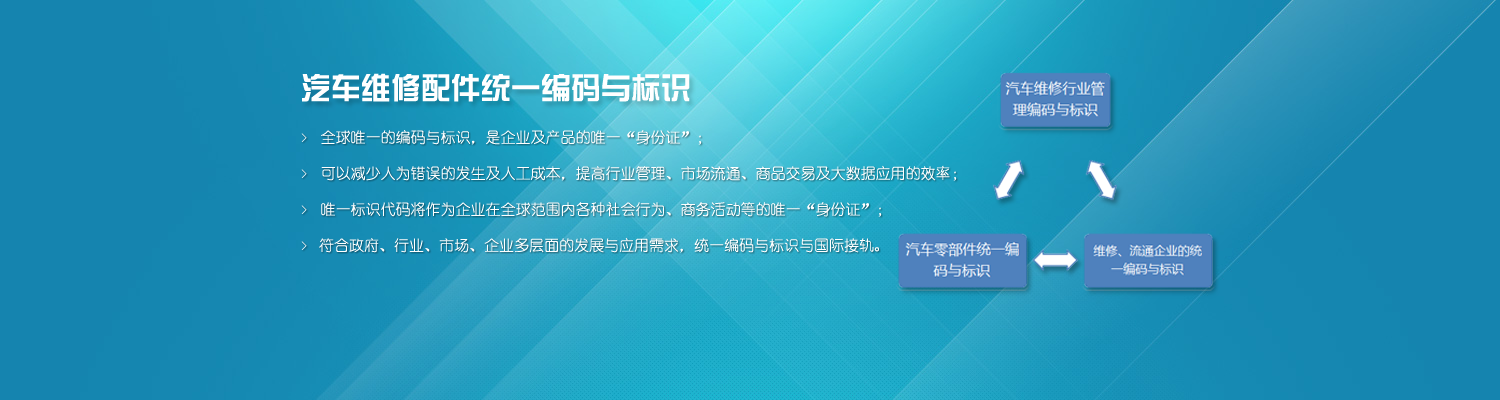
<style>
.page{position:relative;width:1500px;height:400px}
.page>*{position:absolute;margin:0}
.t1{font:30px "ç»å¸ç»¼èºä½ç®-regular";color:#ffffff}
.t2{font:15px/36px "YouYuan";color:#ffffff}
.t3{font:12px/36px "YouYuan";color:#ffffff}
</style>
<div class="page">
<p class="t1" style="left:302px;top:73px;width:388px;height:29px">汽车维修配件统一编码与标识</p>
<p class="t2" style="left:301px;top:130px;width:656px;height:123px"><span class="t3">&gt; </span> 全球唯一的编码与标识，是企业及产品的唯一“身份证”；<br><span class="t3">&gt; </span> 可以减少人为错误的发生及人工成本，提高行业管理、市场流通、商品交易及大数据应用的效率；<br><span class="t3">&gt; </span> 唯一标识代码将作为企业在全球范围内各种社会行为、商务活动等的唯一“身份证”；<br><span class="t3">&gt;  </span>符合政府、行业、市场、企业多层面的发展与应用需求，统一编码与标识与国际接轨。</p>
</div>
